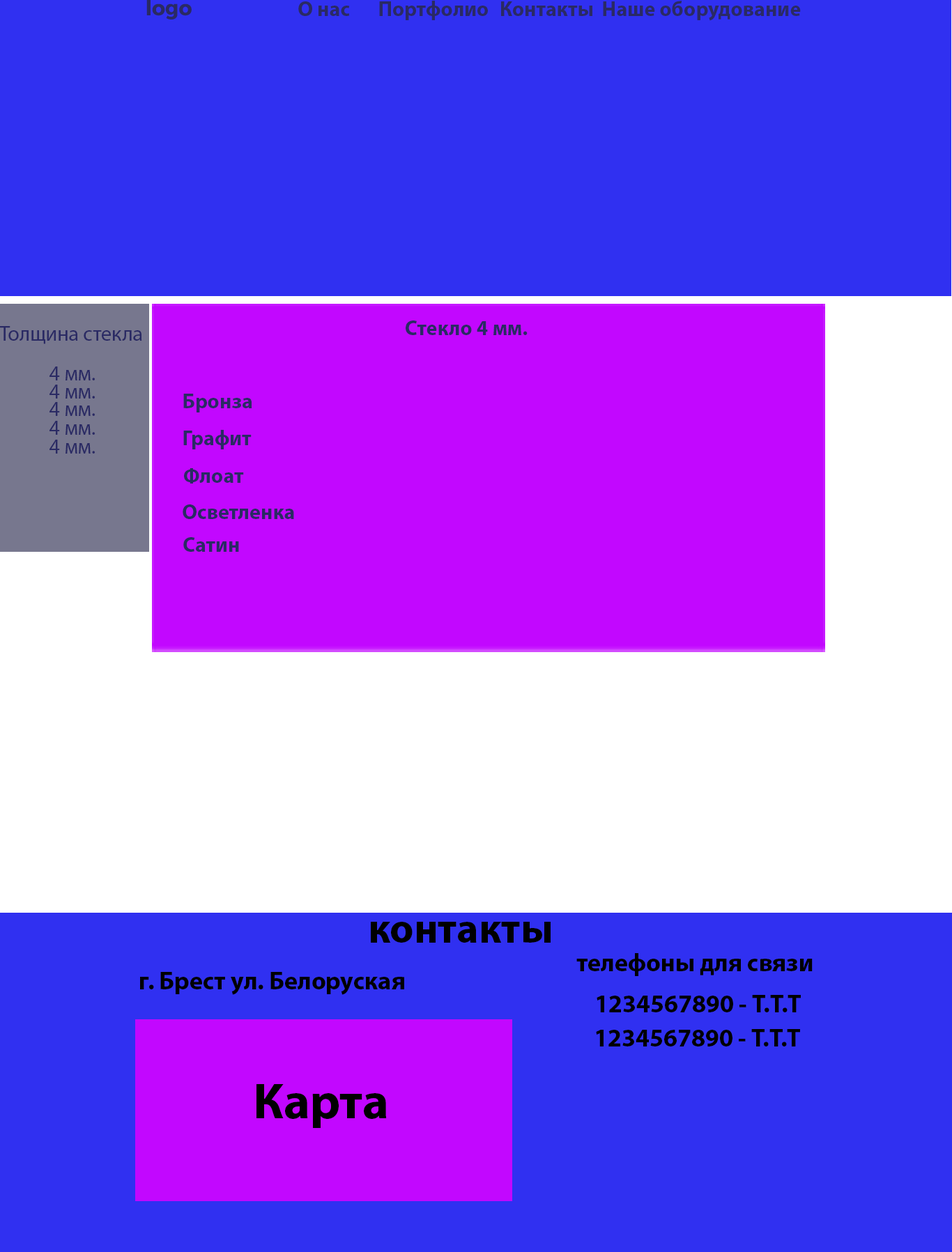
<style>
.page{position:relative;width:952px;height:1252px;background:#3030f1}
.page>*{position:absolute;margin:0}
.t1{font:20.9px "Montserrat-Bold";color:#2a2a64}
.t2{font:20.9px "MyriadPro-Bold";color:#2a2a64}
.t3{font:20.9px "MyriadPro-Regular";color:#2a2a64}
.t4{font:41.8px "MyriadPro-Bold";color:#000000}
.t5{font:25.1px "MyriadPro-Bold";color:#000000}
.t6{font:50.2px "MyriadPro-Bold";color:#000000}
</style>
<div class="page">
<p class="t1" style="left:146px;top:0px;width:46px;height:20px">logo</p>
<p class="t2" style="left:298px;top:1px;width:52px;height:15px">О нас</p>
<p class="t2" style="left:379px;top:1px;width:109px;height:19px">Портфолио</p>
<p class="t2" style="left:501px;top:1px;width:91px;height:15px">Контакты</p>
<p class="t2" style="left:603px;top:1px;width:198px;height:20px">Наше оборудование</p>
<p class="t3" style="left:0px;top:326px;width:142px;height:18px">Толщина стекла</p>
<p class="t2" style="left:406px;top:321px;width:122px;height:14px">Стекло 4 мм.</p>
<p class="t3" style="left:49px;top:367px;width:46px;height:14px">4 мм.</p>
<p class="t3" style="left:49px;top:385px;width:46px;height:14px">4 мм.</p>
<p class="t2" style="left:183px;top:394px;width:69px;height:19px">Бронза</p>
<p class="t3" style="left:49px;top:402px;width:46px;height:14px">4 мм.</p>
<p class="t3" style="left:49px;top:421px;width:46px;height:14px">4 мм.</p>
<p class="t2" style="left:183px;top:430px;width:69px;height:20px">Графит</p>
<p class="t3" style="left:49px;top:440px;width:46px;height:14px">4 мм.</p>
<p class="t2" style="left:184px;top:468px;width:60px;height:16px">Флоат</p>
<p class="t2" style="left:183px;top:505px;width:111px;height:14px">Осветленка</p>
<p class="t2" style="left:183px;top:537px;width:56px;height:15px">Сатин</p>
<p class="t4" style="left:371px;top:922px;width:180px;height:21px">контакты</p>
<p class="t5" style="left:576px;top:953px;width:237px;height:23px">телефоны для связи</p>
<p class="t5" style="left:140px;top:972px;width:264px;height:23px">г. Брест ул. Белоруская</p>
<p class="t5" style="left:597px;top:995px;width:204px;height:18px">1234567890 - Т.Т.Т</p>
<p class="t5" style="left:596px;top:1029px;width:204px;height:18px">1234567890 - Т.Т.Т</p>
<p class="t6" style="left:256px;top:1084px;width:131px;height:44px">Карта</p>
</div>
